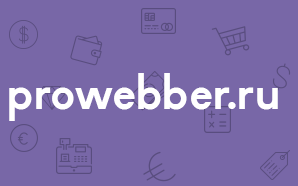
<style>
.page{position:relative;width:298px;height:186px;background:#7867a7}
.page>*{position:absolute;margin:0}
.t1{font:45.7px "TGNeuramatica-Bold";color:#ffffff}
</style>
<div class="page">
<p class="t1" style="left:9px;top:73px;width:269px;height:48px">prowebber.ru</p>
</div>
